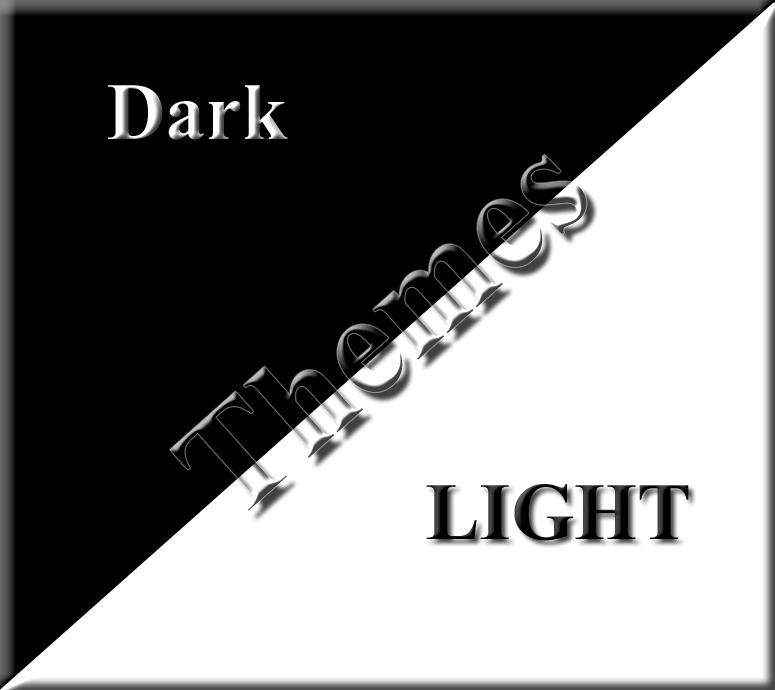
<style>
.page{position:relative;width:775px;height:690px;background:#000000}
.page>*{position:absolute;margin:0}
.t1{font:81px "TimesNewRomanPS-BoldMT"}
.t2{font:81px "TimesNewRomanPS-BoldMT";color:#000000}
</style>
<div class="page">
<p class="t1" style="left:108px;top:85px;width:180px;height:55px">Dark</p>
<p class="t2" style="left:426px;top:484px;width:263px;height:57px">LIGHT</p>
</div>
